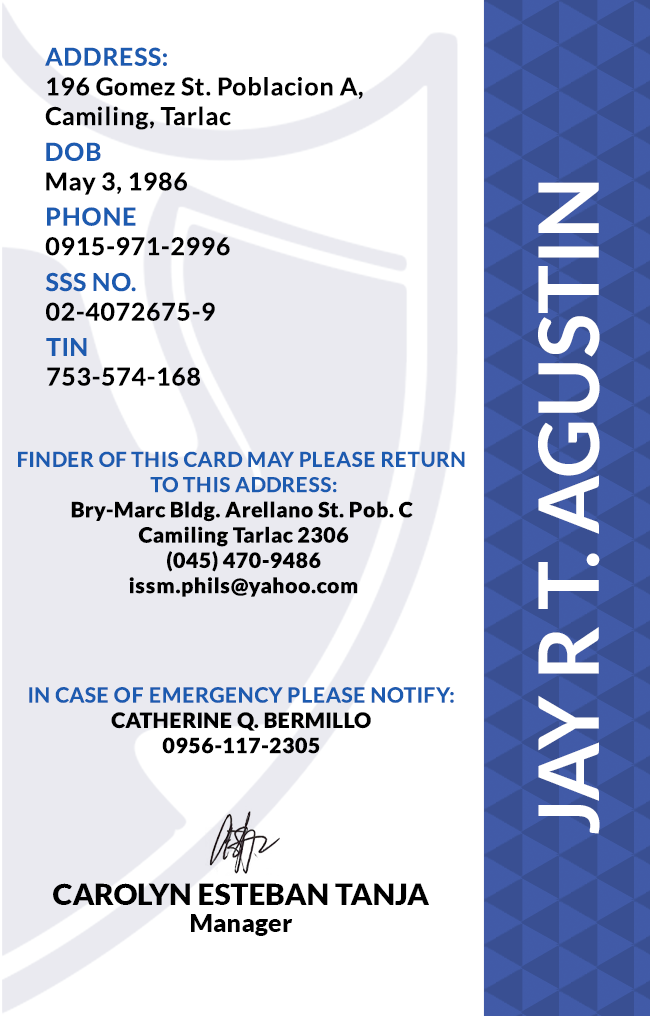
<style>
.page{position:relative;width:650px;height:1016px;background:#ffffff}
.page>*{position:absolute;margin:0}
.t1{font:24.7px/29.6px "Lato-Bold";letter-spacing:0.025em;color:#000000}
.t2{font:24.7px/29.6px "Lato-Bold";letter-spacing:0.025em;color:#1c5bb0}
.t3{font:24.7px/29.6px "Lato-Bold";letter-spacing:0.025em}
.t4{font:83.3px "Lato-Bold";color:#ffffff}
.t5{font:21.1px "Lato-Black";letter-spacing:0.025em}
.t6{font:20.5px/25.3px "Lato-Bold";letter-spacing:0.025em;text-transform:uppercase}
.t7{font:21.1px/25.3px "Lato-Bold";letter-spacing:0.025em}
.t8{font:29.5px "Lato-Black";color:#000000}
.t9{font:25px "Lato-Black";color:#000000}
</style>
<div class="page">
<p class="t1" style="left:45px;top:47px;width:318px;height:83px"><span class="t2">ADDRESS:<br></span>196 Gomez St. Poblacion A, <br>Camiling, Tarlac</p>
<p class="t3" style="left:46px;top:142px;width:141px;height:53px">DOB<br>May 3, 1986</p>
<p class="t4" style="left:538px;top:182px;width:62px;height:652px;rotate:-90deg">JAY R T. AGUSTIN</p>
<p class="t3" style="left:45px;top:207px;width:185px;height:49px">PHONE <br>0915-971-2996</p>
<p class="t3" style="left:45px;top:272px;width:170px;height:49px">SSS NO.<br>02-4072675-9</p>
<p class="t1" style="left:46px;top:338px;width:154px;height:48px">TIN<br>753-574-168</p>
<p class="t5" style="left:18px;top:451px;width:447px;height:146px;text-align:center"><span class="t6">Finder of this card may please return <br>to this address:<br></span>Bry-Marc Bldg. Arellano St. Pob. C <br>Camiling Tarlac 2306<br>(045) 470-9486<br>issm.phils@yahoo.com</p>
<p class="t7" style="left:29px;top:687px;width:425px;height:67px;text-align:center">IN CASE OF EMERGENCY PLEASE NOTIFY:<br><span class="t5">CATHERINE Q. BERMILLO<br>0956-117-2305</span></p>
<p class="t8" style="left:53px;top:883px;width:376px;height:22px">CAROLYN ESTEBAN TANJA</p>
<p class="t9" style="left:191px;top:914px;width:102px;height:22px">Manager</p>
</div>
